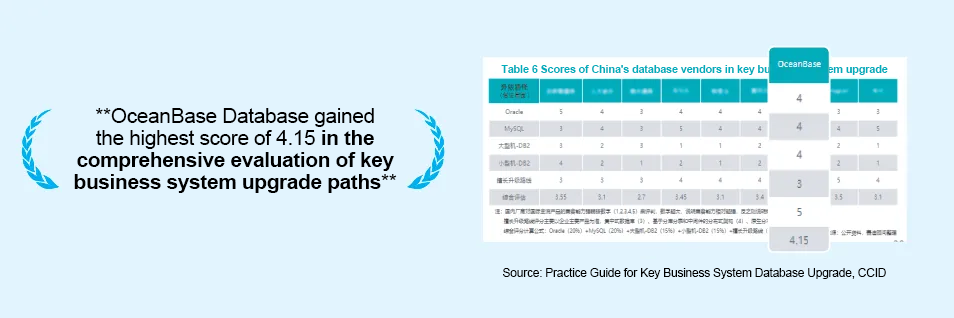
<style>
.page{position:relative;width:954px;height:318px;background:#e2f4fe}
.page>*{position:absolute;margin:0}
.t1{font:11px "Arial-BoldMT";letter-spacing:-0.02em;color:#01adbc}
.t2{font:21px/22px "Arial-BoldMT";letter-spacing:-0.02em;color:#000000}
.t3{font:21px/22px "ArialMT";letter-spacing:-0.02em;color:#000000}
.t4{font:12px "ArialMT";letter-spacing:-0.02em;color:#000000}
</style>
<div class="page">
<p class="t1" style="left:501px;top:65px;width:387px;height:10px">Table 6 Scores of China's database vendors in key business system upgrade</p>
<p class="t2" style="left:74px;top:108px;width:323px;height:85px;text-align:center"><span class="t3">**OceanBase Database gained <br>the highest score of 4.15 </span>in the comprehensive evaluation of key business system upgrade paths<span class="t3">**</span></p>
<p class="t4" style="left:503px;top:268px;width:383px;height:11px">Source: Practice Guide for Key Business System Database Upgrade, CCID</p>
</div>
